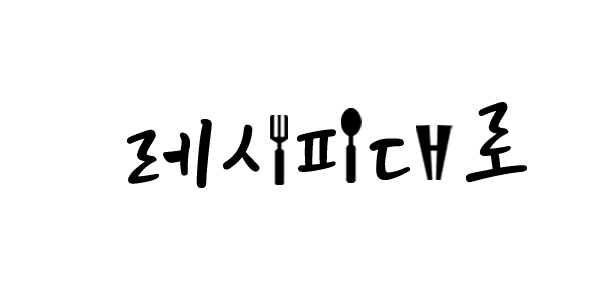
<style>
.page{position:relative;width:600px;height:300px;background:#ffffff}
.page>*{position:absolute;margin:0}
.t1{font:146px "TTGamsungradioR";color:#000000}
</style>
<div class="page">
<p class="t1" style="left:127px;top:102px;width:400px;height:86px">레시피대로</p>
</div>
